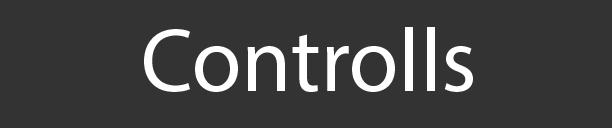
<style>
.page{position:relative;width:612px;height:128px;background:#333333}
.page>*{position:absolute;margin:0}
.t1{font:90px "MyriadPro-Regular";color:#ffffff}
</style>
<div class="page">
<p class="t1" style="left:144px;top:27px;width:329px;height:65px">Controlls</p>
</div>
